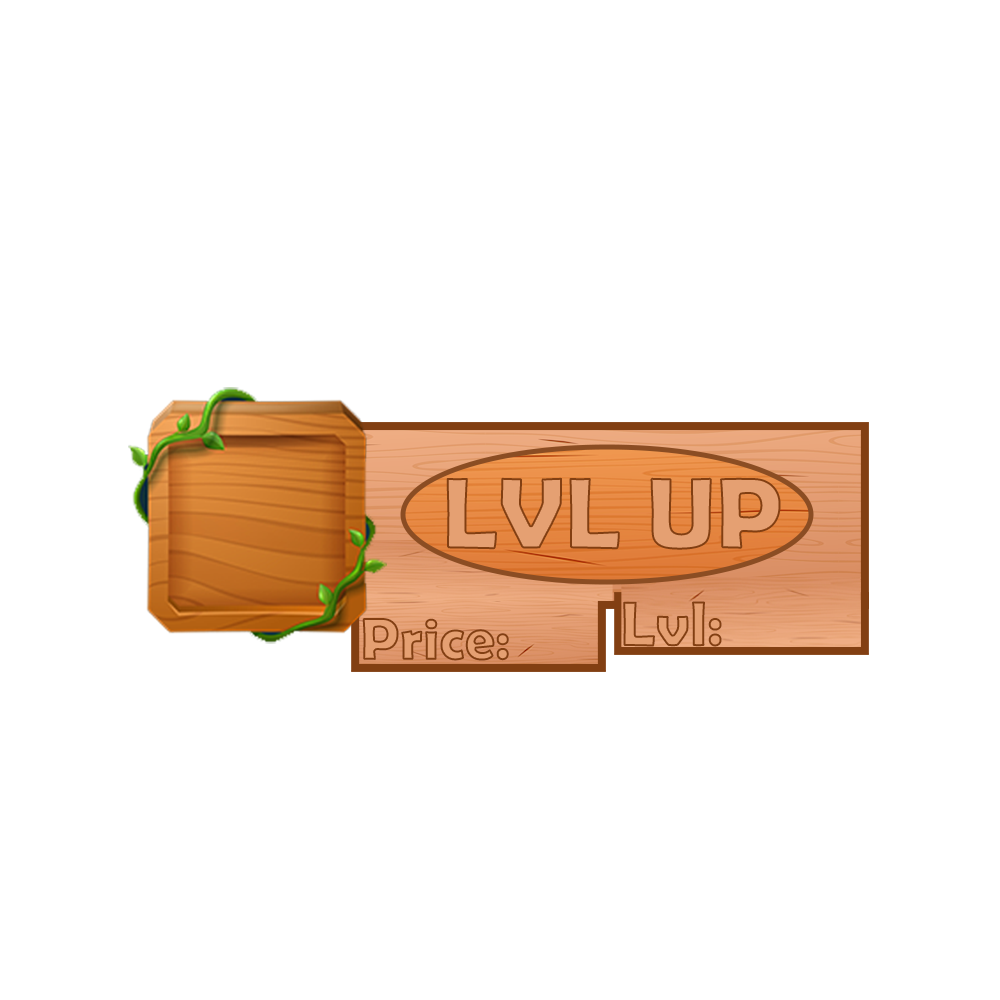
<style>
.page{position:relative;width:1000px;height:1000px;background:#ffffff}
.page>*{position:absolute;margin:0}
.t1{font:102.4px "BerlinSansFBDemi-Bold";color:#e5a072}
.t2{font:64.3px "BerlinSansFBDemi-Bold"}
.t3{font:60.6px "BerlinSansFBDemi-Bold"}
</style>
<div class="page">
<p class="t1" style="left:446px;top:477px;width:335px;height:73px">LVL UP</p>
<p class="t2" style="left:623px;top:601px;width:99px;height:46px">Lvl:</p>
<p class="t3" style="left:362px;top:618px;width:147px;height:43px">Price:</p>
</div>
